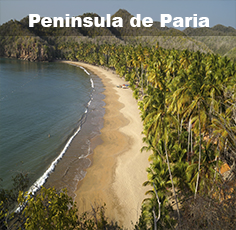
<style>
.page{position:relative;width:236px;height:230px}
.page>*{position:absolute;margin:0}
.t1{font:18px "Arial-Black";color:#ffffff}
</style>
<div class="page">
<p class="t1" style="left:29px;top:14px;width:181px;height:13px">Peninsula de Paria</p>
</div>
